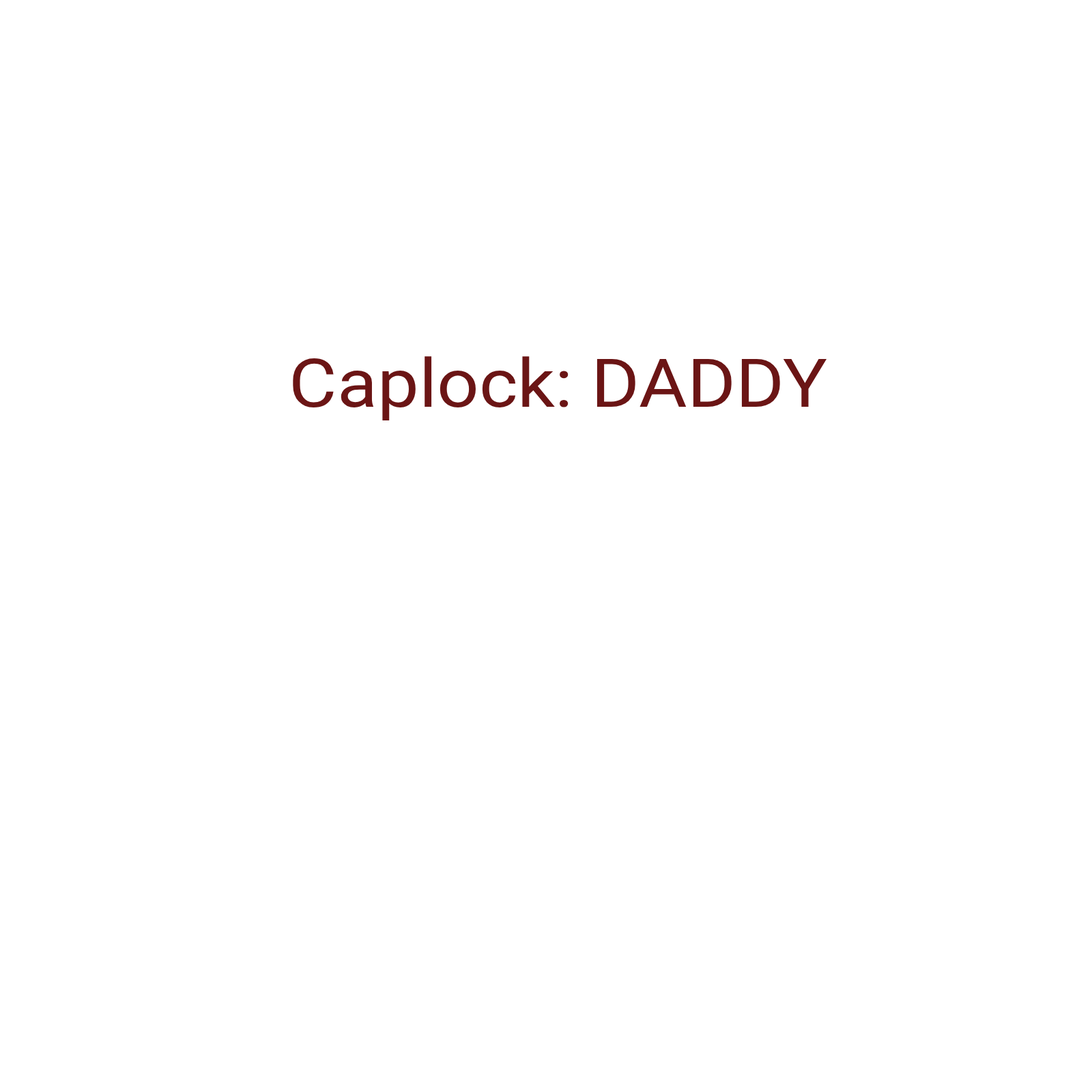
<style>
.page{position:relative;width:1092px;height:1092px;background:#ffffff}
.page>*{position:absolute;margin:0}
.t1{font:67.2px "Roboto-Regular";color:#6b1515;scale:1.1 1}
</style>
<div class="page">
<p class="t1" style="left:293px;top:356px;width:534px;height:64px">Caplock: DADDY</p>
</div>
